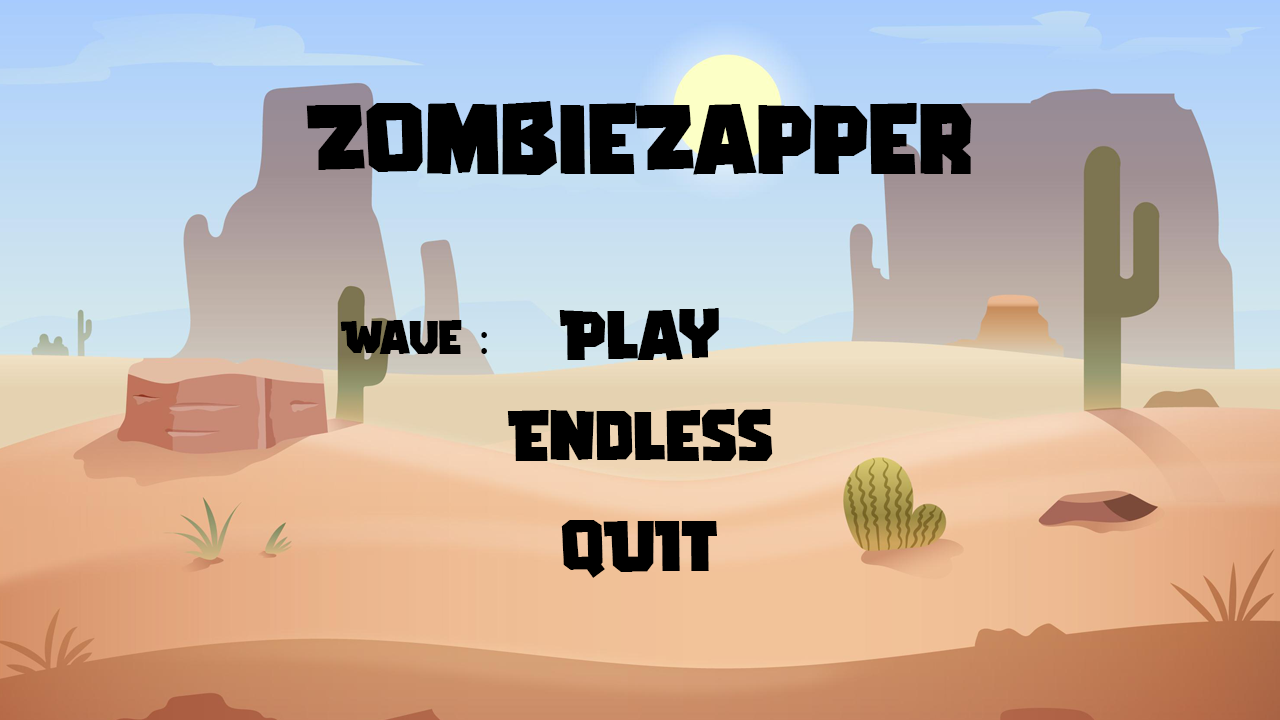
<style>
.page{position:relative;width:1280px;height:720px}
.page>*{position:absolute;margin:0}
.t1{font:100px "GAMERIA";color:#000000}
.t2{font:72px "GAMERIA";color:#000000}
.t3{font:48px "GAMERIA";color:#000000}
.t4{font:48px "MyriadPro-Regular";color:#000000}
</style>
<div class="page">
<p class="t1" style="left:306px;top:101px;width:666px;height:74px">ZombieZapper</p>
<p class="t2" style="left:559px;top:308px;width:160px;height:52px">Play</p>
<p class="t3" style="left:340px;top:320px;width:147px;height:34px">Wave <span class="t4">:</span></p>
<p class="t2" style="left:507px;top:409px;width:266px;height:52px">Endless</p>
<p class="t2" style="left:561px;top:520px;width:156px;height:58px">QUIT</p>
</div>
